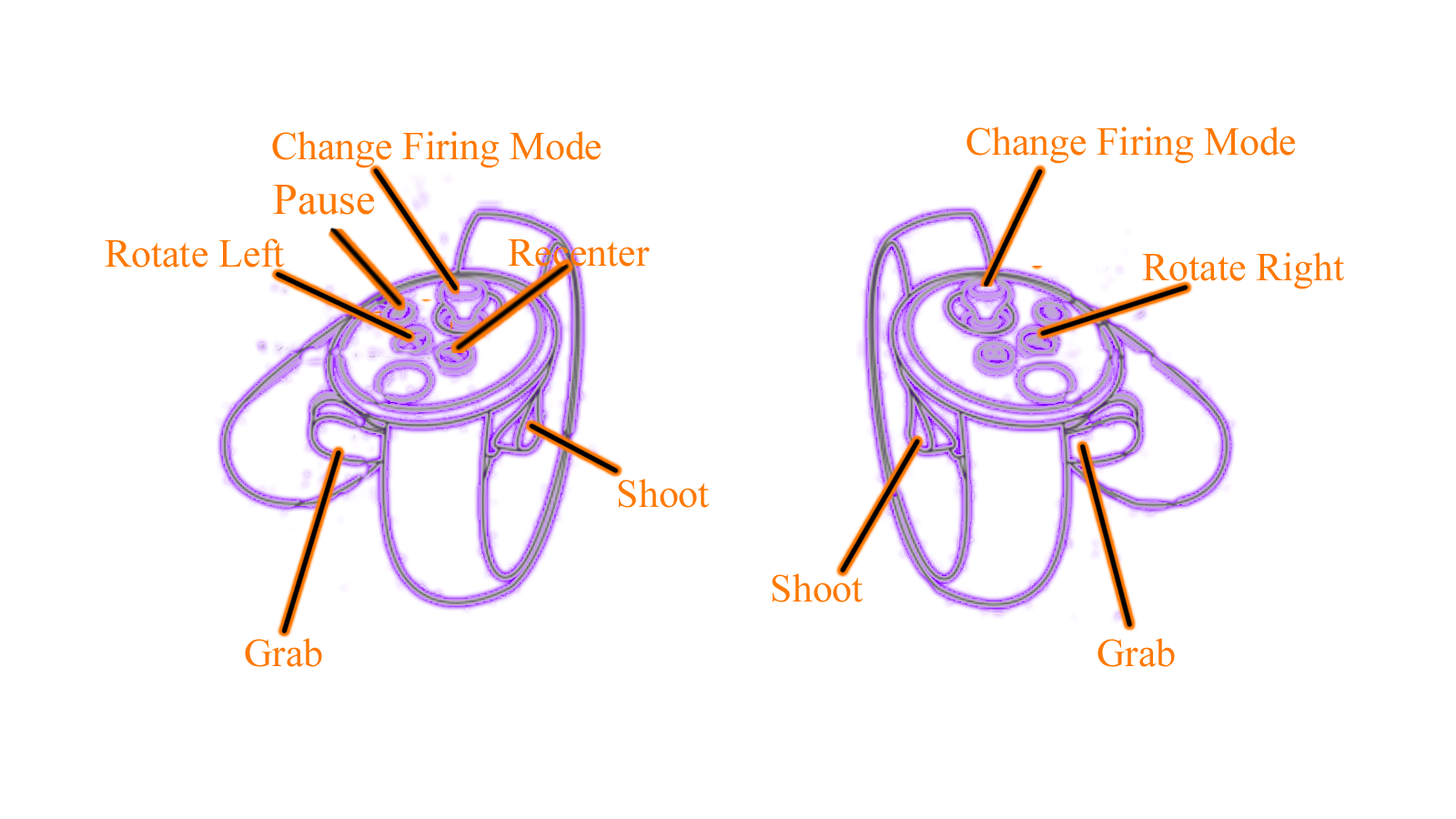
<style>
.page{position:relative;width:1456px;height:819px;background:#ffffff}
.page>*{position:absolute;margin:0}
.t1{font:39.7px "TimesNewRomanPSMT";color:#ff7800}
.t2{font:43.7px "TimesNewRomanPSMT";color:#ff7800}
</style>
<div class="page">
<p class="t1" style="left:272px;top:131px;width:329px;height:37px">Change Firing Mode</p>
<p class="t1" style="left:966px;top:126px;width:329px;height:38px">Change Firing Mode</p>
<p class="t2" style="left:273px;top:185px;width:101px;height:30px">Pause</p>
<p class="t1" style="left:105px;top:238px;width:180px;height:30px">Rotate Left</p>
<p class="t1" style="left:508px;top:239px;width:142px;height:28px">Recenter</p>
<p class="t1" style="left:1142px;top:252px;width:203px;height:37px">Rotate Right</p>
<p class="t1" style="left:618px;top:479px;width:92px;height:29px">Shoot</p>
<p class="t1" style="left:772px;top:573px;width:92px;height:29px">Shoot</p>
<p class="t1" style="left:245px;top:638px;width:77px;height:29px">Grab</p>
<p class="t1" style="left:1097px;top:638px;width:78px;height:29px">Grab</p>
</div>
